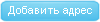
<style>
.page{position:relative;width:100px;height:22px}
.page>*{position:absolute;margin:0}
.t1{font:11px "ArialMT";color:#ffffff}
</style>
<div class="page">
<p class="t1" style="left:8px;top:6px;width:84px;height:10px">Добавить адрес</p>
</div>
